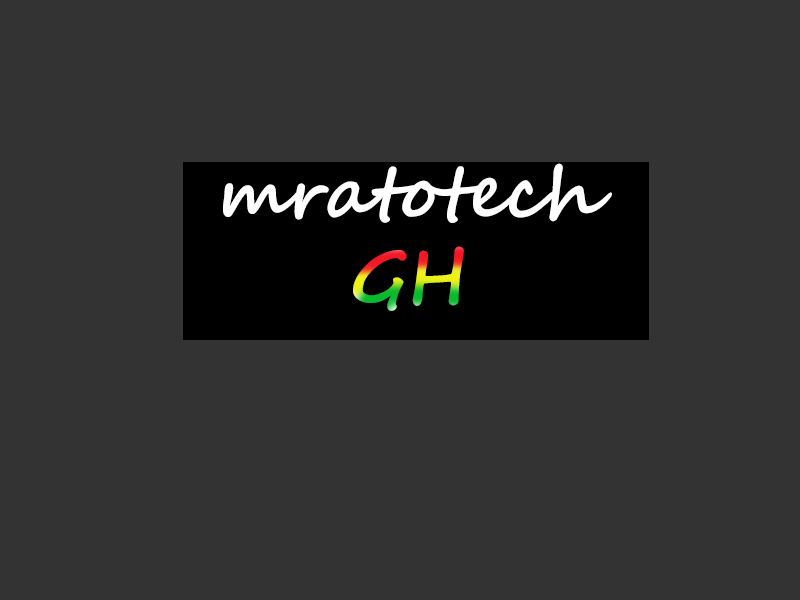
<style>
.page{position:relative;width:800px;height:600px;background:#333333}
.page>*{position:absolute;margin:0}
.t1{font:72px "SegoeScript-Bold";color:#ffffff}
</style>
<div class="page">
<p class="t1" style="left:223px;top:163px;width:389px;height:148px;text-align:center">mratotech<br>GH</p>
</div>
